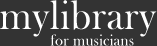
<style>
.page{position:relative;width:157px;height:46px;background:#333333}
.page>*{position:absolute;margin:0}
.t1{font:42px "BaskOldFace";letter-spacing:0.02em;color:#ffffff;scale:0.95 1}
.t2{font:16px "BaskOldFace";letter-spacing:0.02em;color:#ffffff;scale:0.95 1}
</style>
<div class="page">
<p class="t1" style="left:0px;top:0px;width:157px;height:37px">mylibrary</p>
<p class="t2" style="left:50px;top:34px;width:84px;height:12px">for musicians</p>
</div>
